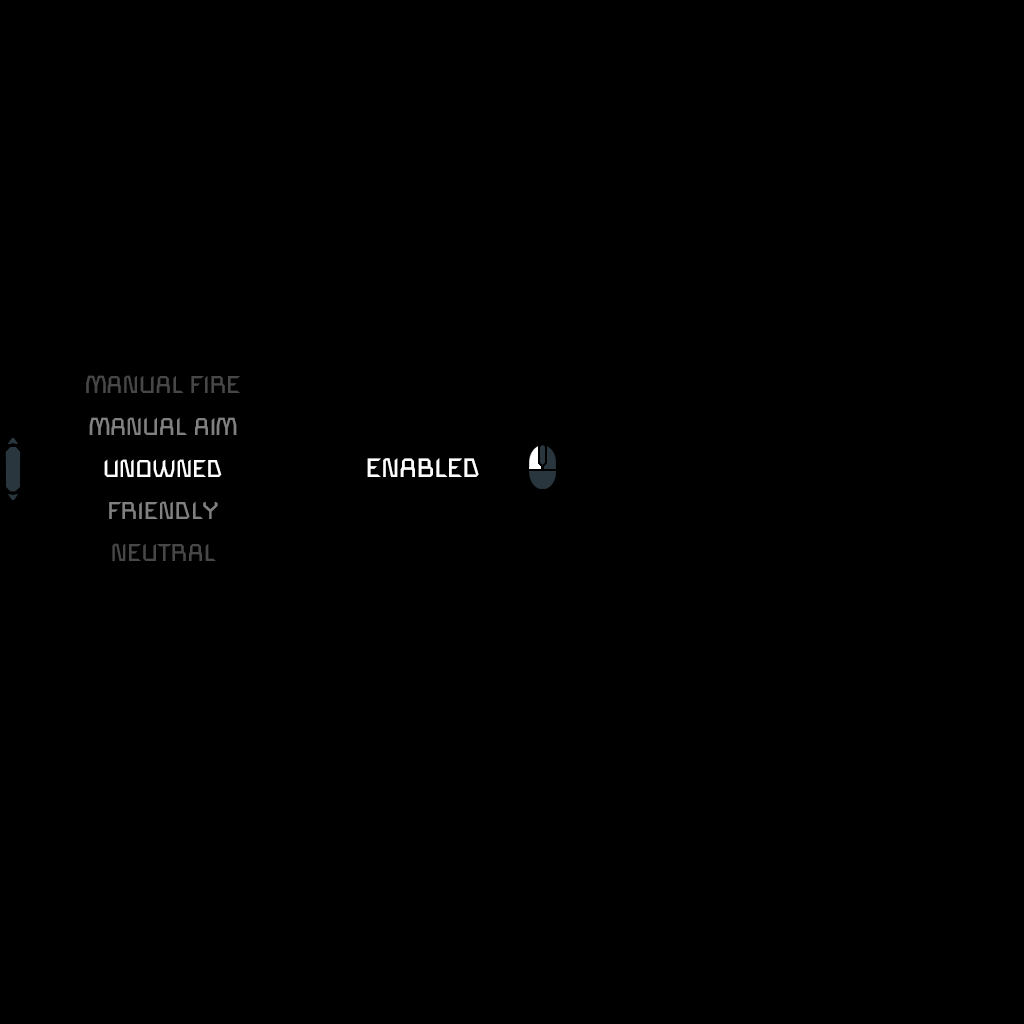
<style>
.page{position:relative;width:1024px;height:1024px;background:#000000}
.page>*{position:absolute;margin:0}
.t1{font:24px "SpaceEngineers";color:#474747}
.t2{font:24px "SpaceEngineers";color:#808080}
.t3{font:24px "SpaceEngineers";color:#ffffff}
.t4{font:26px "SpaceEngineers";color:#ffffff}
</style>
<div class="page">
<p class="t1" style="left:86px;top:375px;width:154px;height:18px">MANUAL FIRE</p>
<p class="t2" style="left:89px;top:417px;width:148px;height:18px">MANUAL AIM</p>
<p class="t3" style="left:104px;top:459px;width:118px;height:18px">UNOWNED</p>
<p class="t4" style="left:367px;top:458px;width:112px;height:19px">ENABLED</p>
<p class="t2" style="left:109px;top:501px;width:109px;height:18px">FRIENDLY</p>
<p class="t1" style="left:112px;top:543px;width:104px;height:18px">NEUTRAL</p>
</div>
